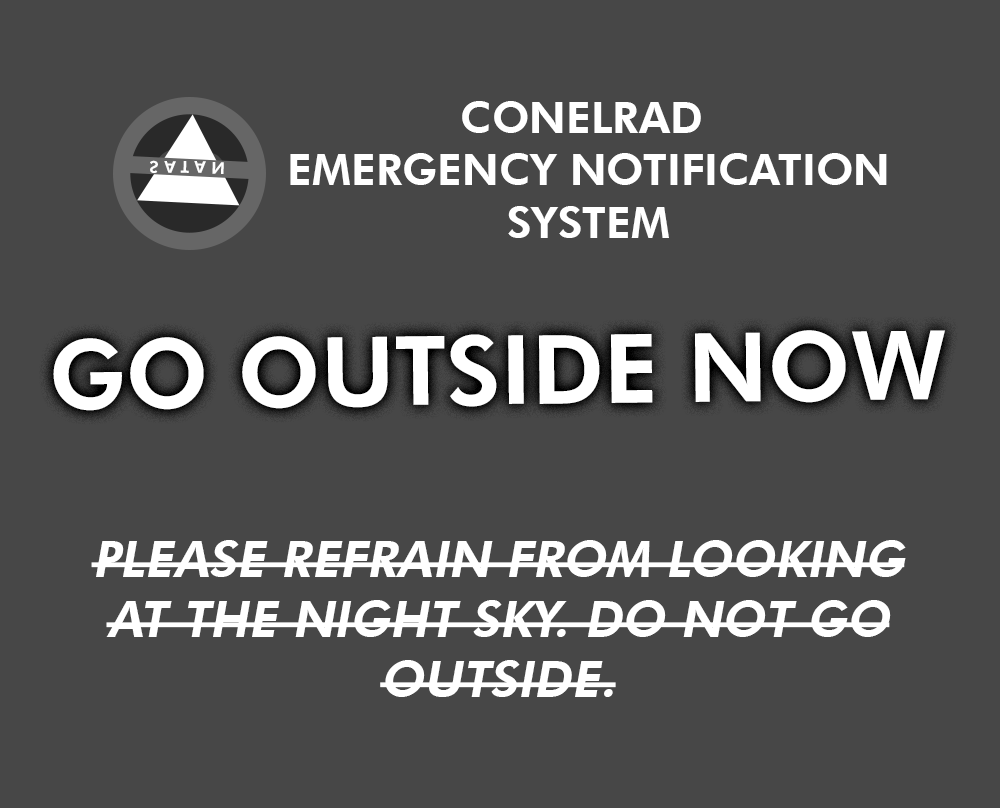
<style>
.page{position:relative;width:1000px;height:808px;background:#474747}
.page>*{position:absolute;margin:0}
.t1{font:43.7px "FuturaBT-Heavy";color:#ffffff;text-transform:uppercase}
.t2{font:16.4px "FuturaBT-Heavy";letter-spacing:0.34em;color:#ffffff;text-transform:uppercase}
.t3{font:96px "FuturaBT-Heavy";color:#ffffff;text-transform:uppercase}
.t4{font:50px "FuturaBT-Heavy";color:#ffffff;text-transform:uppercase;font-style:italic}
</style>
<div class="page">
<p class="t1" style="left:290px;top:101px;width:597px;height:137px;text-align:center">CONELRAD <br>EMERGENCY NOTIFICATION<br>SYSTEM</p>
<p class="t2" style="left:150px;top:160px;width:74px;height:14px;rotate:1deg">SATAN</p>
<p class="t3" style="left:53px;top:330px;width:892px;height:81px;rotate:-1deg">GO OUTSIDE NOW</p>
<p class="t4" style="left:91px;top:540px;width:815px;height:157px;text-align:center">please refrain from looking at the night sky. DO NOT GO<br>OUTSIDE.</p>
</div>
